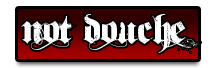
<style>
.page{position:relative;width:216px;height:68px;background:#ffffff}
.page>*{position:absolute;margin:0}
.t1{font:55.1px "Dirt2SoulStalker";color:#ffffff;scale:0.95 1}
</style>
<div class="page">
<p class="t1" style="left:21px;top:14px;width:180px;height:39px">Not Douche</p>
</div>
